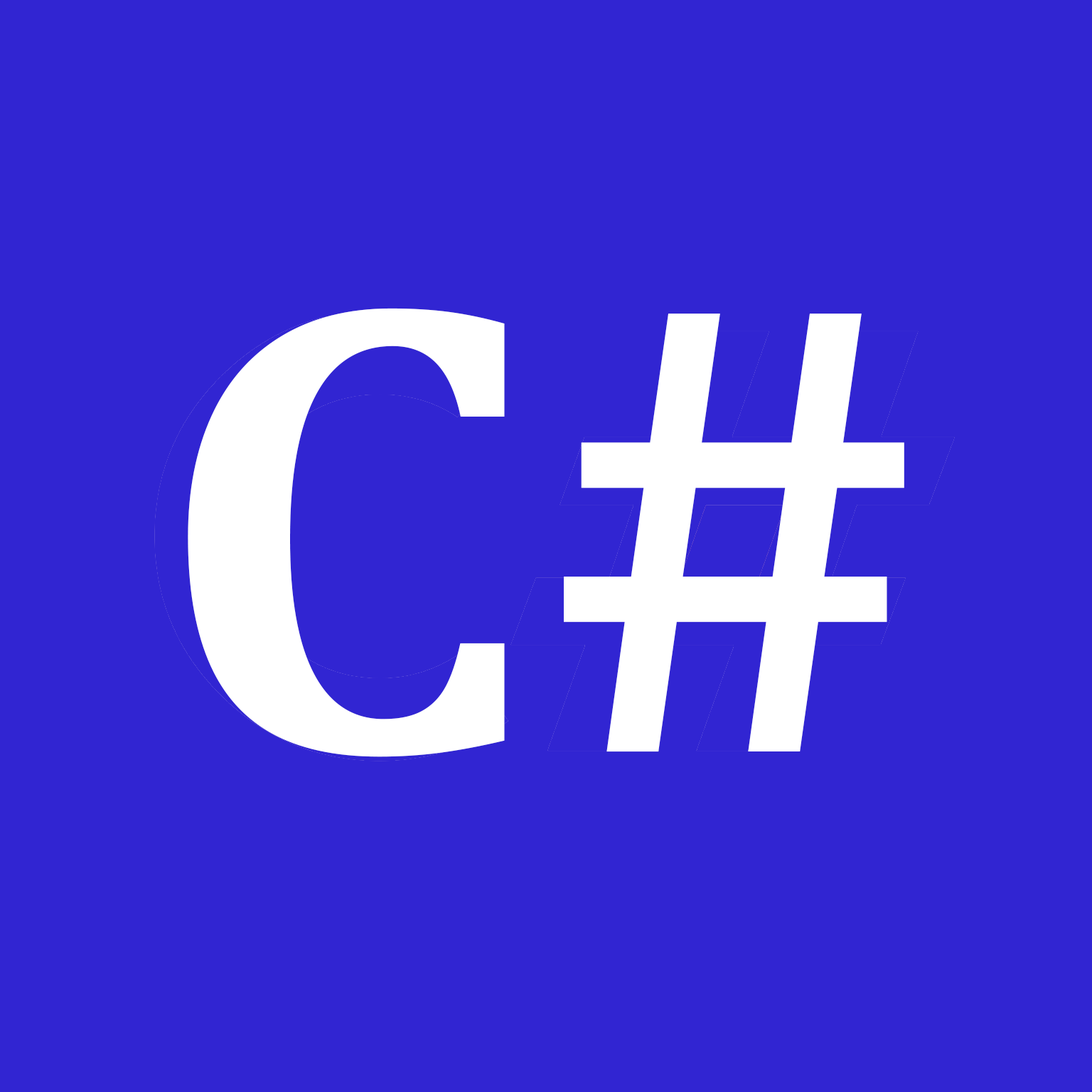
<style>
.page{position:relative;width:1092px;height:1092px;background:#3125d2}
.page>*{position:absolute;margin:0}
.t1{font:656.9px "Cambria-Bold";color:#ffffff}
</style>
<div class="page">
<p class="t1" style="left:188px;top:308px;width:716px;height:449px">C#</p>
</div>
